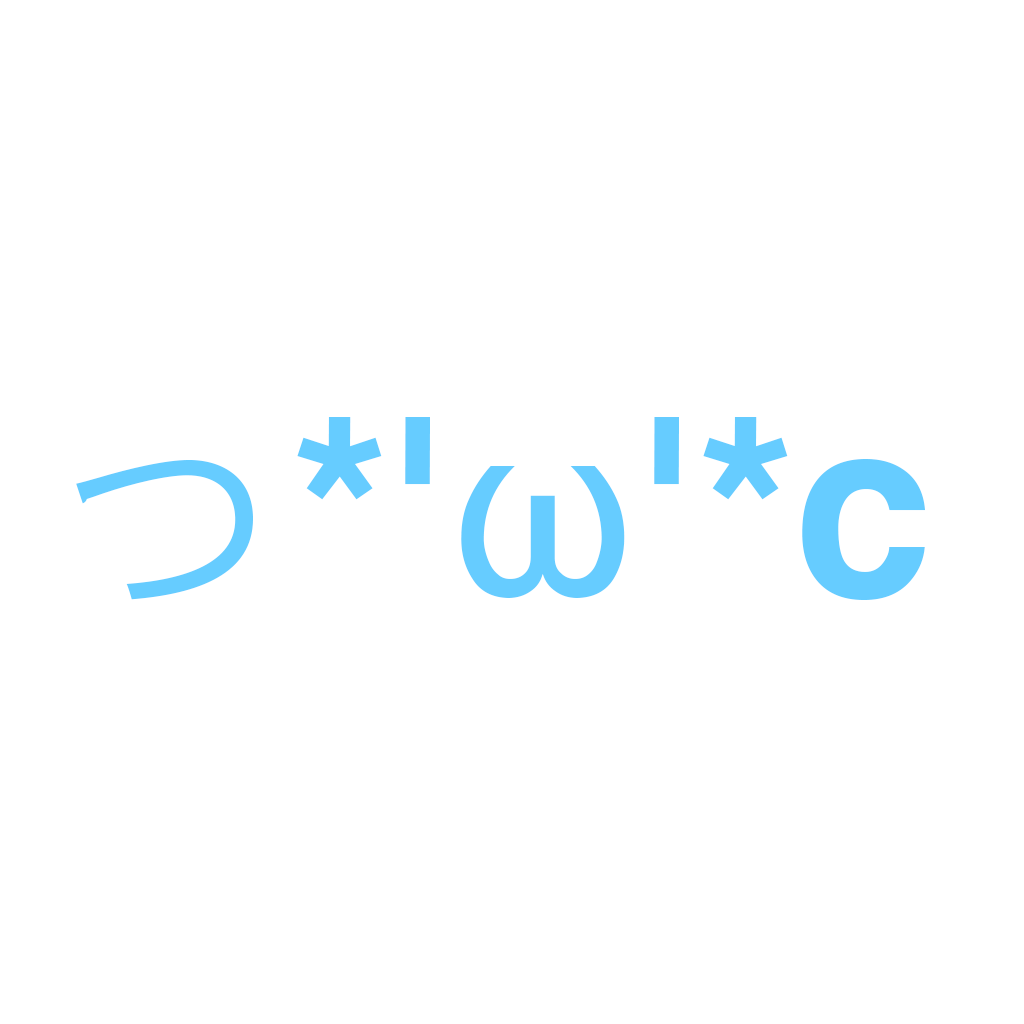
<style>
.page{position:relative;width:1024px;height:1024px;background:#ffffff}
.page>*{position:absolute;margin:0}
.t1{font:250px "Helvetica_cyr-Bold";color:#66ccff}
.t2{font:250px "KozGoPr6N-Regular";color:#66ccff}
.t3{font:250px "Helvetica";color:#66ccff}
</style>
<div class="page">
<p class="t1" style="left:76px;top:417px;width:849px;height:183px"><span class="t2">っ</span>*'<span class="t3">ω</span>'*c</p>
</div>
